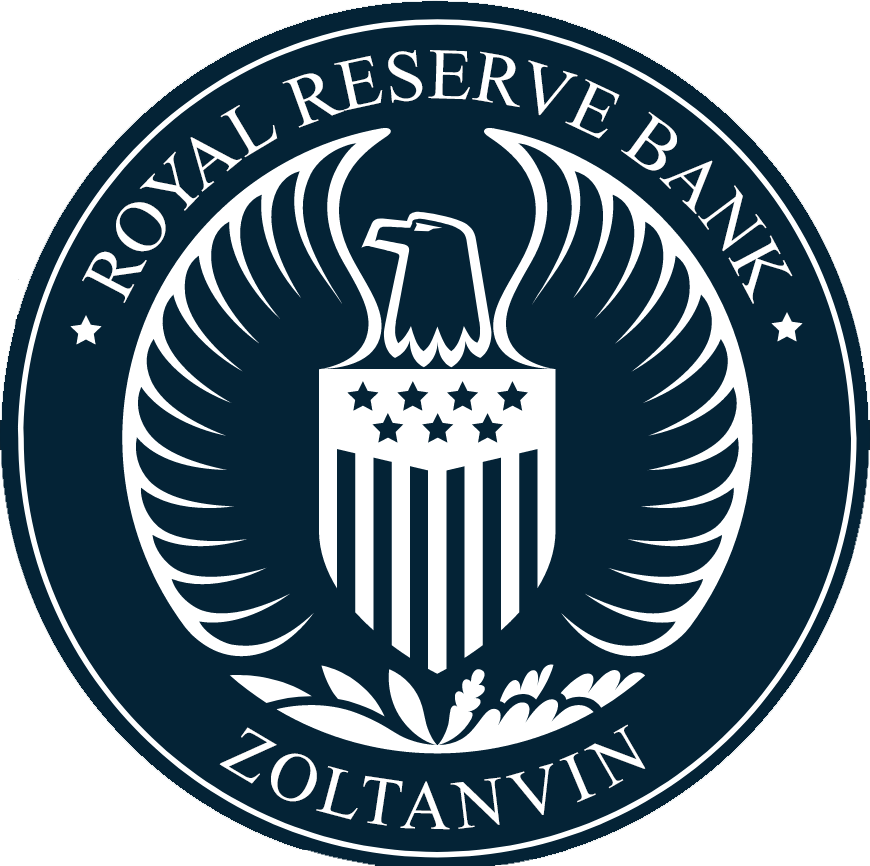
<style>
.page{position:relative;width:870px;height:866px;background:#042336}
.page>*{position:absolute;margin:0}
.t1{font:72.6px "TimesNewRomanPSMT";color:#ffffff}
.t2{font:72.6px "TimesNewRomanPSMT";letter-spacing:-0.025em;color:#ffffff}
.t3{font:72.6px "TimesNewRomanPSMT";letter-spacing:-0.05em;color:#ffffff}
.t4{font:72.6px "TimesNewRomanPSMT";letter-spacing:0.025em;color:#ffffff}
.t5{font:69.4px "TimesNewRomanPSMT";letter-spacing:0.1em;color:#ffffff}
.t6{font:69.4px "TimesNewRomanPSMT";letter-spacing:0.16em;color:#ffffff}
</style>
<div class="page">
<p class="t1" style="left:82px;top:50px;width:711px;height:254px;text-align:center"><span class="t2">R</span><span class="t3">OY</span><span class="t4">AL</span> RESERVE BANK</p>
<p class="t5" style="left:219px;top:724px;width:427px;height:106px">ZOLTA<span class="t6">NVIN</span></p>
</div>
